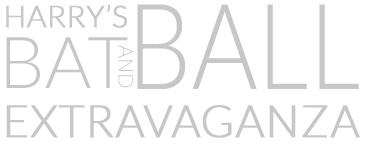
<style>
.page{position:relative;width:367px;height:147px;background:#ffffff}
.page>*{position:absolute;margin:0}
.t1{font:29.9px "Lato-Light";color:#c7c7c7;font-weight:bold}
.t2{font:119.6px "Lato-Light";color:#c7c7c7;scale:0.85 1}
.t3{font:71.7px "Lato-Light";color:#c7c7c7}
.t4{font:20.2px "Lato-Light";color:#c7c7c7}
.t5{font:44.8px "Lato-Light";color:#c7c7c7;font-weight:bold}
</style>
<div class="page">
<p class="t1" style="left:6px;top:4px;width:121px;height:24px">HARRY’S</p>
<p class="t2" style="left:137px;top:4px;width:222px;height:85px">BALL</p>
<p class="t3" style="left:6px;top:37px;width:122px;height:51px">BAT</p>
<p class="t4" style="left:118px;top:45px;width:15px;height:43px;rotate:90deg">AND</p>
<p class="t5" style="left:6px;top:105px;width:354px;height:33px">EXTRAVAGANZA</p>
</div>
